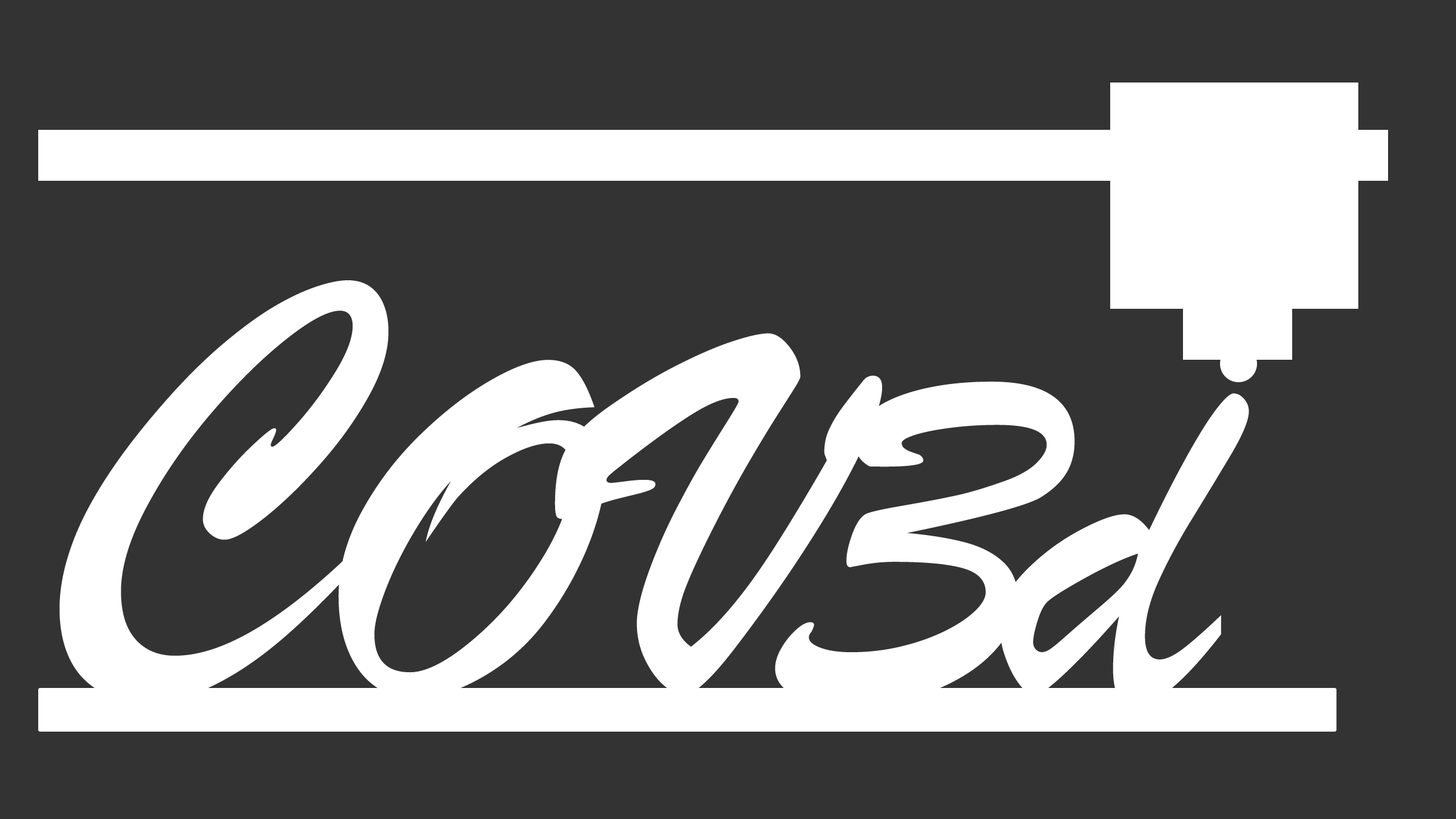
<style>
.page{position:relative;width:1456px;height:819px;background:#333333}
.page>*{position:absolute;margin:0}
.t1{font:525.2px "BrushScriptMT";color:#ffffff}
</style>
<div class="page">
<p class="t1" style="left:59px;top:280px;width:330px;height:423px">C</p>
<p class="t1" style="left:554px;top:333px;width:328px;height:362px">V</p>
<p class="t1" style="left:339px;top:360px;width:266px;height:338px">O</p>
<p class="t1" style="left:775px;top:382px;width:300px;height:324px">3</p>
<p class="t1" style="left:999px;top:393px;width:250px;height:313px">d</p>
</div>
